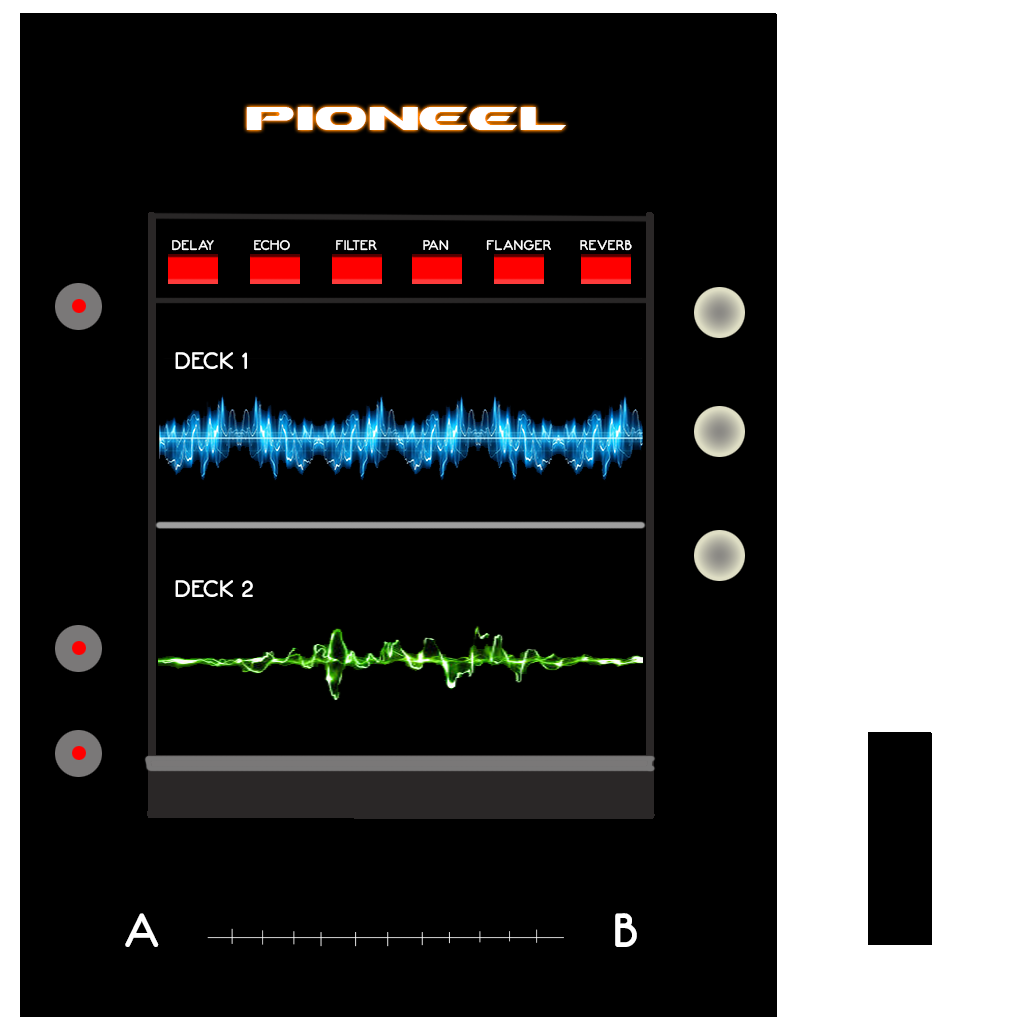
<style>
.page{position:relative;width:1024px;height:1024px;background:#000000}
.page>*{position:absolute;margin:0}
.t1{font:48px "Ben-Pioneer-Bold";color:#ffffff}
.t2{font:14px "Neon80s";color:#fefefe}
.t3{font:14px "Neon80s";color:#ffffff}
.t4{font:24px "Neon80s";color:#ffffff}
.t5{font:48px "Neon80s";color:#ffffff}
</style>
<div class="page">
<p class="t1" style="left:246px;top:107px;width:320px;height:23px">PIONEEL</p>
<p class="t2" style="left:172px;top:240px;width:42px;height:11px">DELAY</p>
<p class="t2" style="left:254px;top:240px;width:36px;height:11px">ECHO</p>
<p class="t2" style="left:336px;top:240px;width:41px;height:11px">FILTER</p>
<p class="t2" style="left:423px;top:240px;width:26px;height:10px">PAN</p>
<p class="t2" style="left:486px;top:240px;width:65px;height:11px">FLANGER</p>
<p class="t3" style="left:580px;top:240px;width:52px;height:11px">REVERB</p>
<p class="t4" style="left:175px;top:352px;width:72px;height:17px">DECK 1</p>
<p class="t4" style="left:175px;top:580px;width:78px;height:17px">DECK 2</p>
<p class="t5" style="left:125px;top:913px;width:34px;height:34px">A</p>
<p class="t5" style="left:615px;top:913px;width:22px;height:34px">B</p>
</div>
